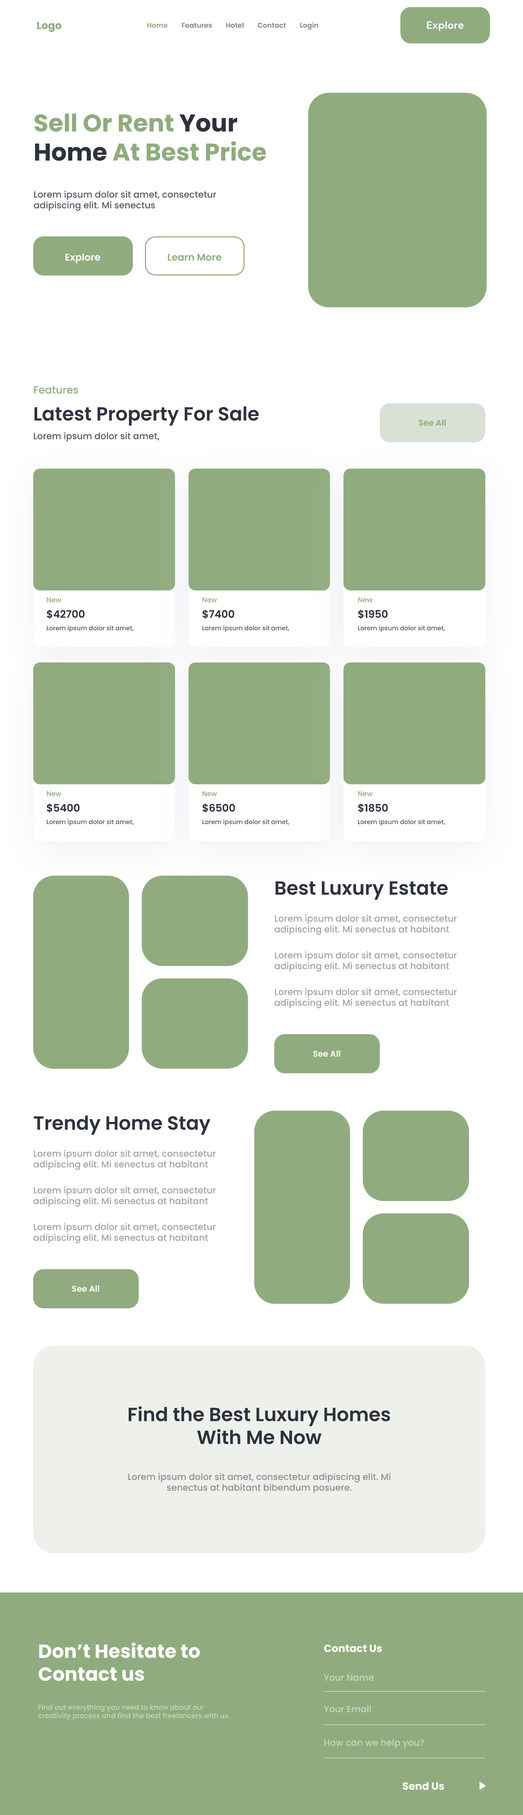
<style>
.page{position:relative;width:523px;height:1815px;background:#ffffff}
.page>*{position:absolute;margin:0}
.t1{font:6.9px "Poppins-SemiBold";color:#90ac7f}
.t2{font:6.9px "Poppins-SemiBold";color:#81848b}
.t3{font:10.4px "DMSans-Bold";color:#ffffff}
.t4{font:24.2px "Poppins-Bold";color:#90ac7f}
.t5{font:24.2px "Poppins-Bold";color:#2d323d}
.t6{font:9px "Poppins-Medium";color:#575b64}
.t7{font:9.7px "Poppins-SemiBold";color:#fefefe}
.t8{font:9.7px "Poppins-SemiBold";color:#90ac7f}
.t9{font:10.4px "Poppins-Medium";color:#90ac7f}
.t10{font:19px "Poppins-SemiBold";color:#2d323d}
.t11{font:8.3px "Poppins-SemiBold";color:#90ac7f}
.t12{font:6.9px "Poppins-Medium";color:#90ac7f}
.t13{font:10.4px "Poppins-SemiBold";color:#2d323d}
.t14{font:6.2px "Poppins-Medium";color:#575b64}
.t15{font:9px "Poppins-Medium";color:#a0a3a8}
.t16{font:8.3px "Poppins-SemiBold";color:#ffffff}
.t17{font:9px "Poppins-Medium";color:#8d9194}
.t18{font:19px "Poppins-Bold";color:#ffffff}
.t19{font:10.4px "Poppins-Bold";color:#ffffff}
.t20{font:9px "Poppins-Medium";color:#c8d6bf}
.t21{font:6.9px "Poppins-Medium";color:#c8d6bf}
</style>
<div class="page">
<p class="t1" style="left:147px;top:23px;width:21px;height:5px">Home</p>
<p class="t2" style="left:182px;top:23px;width:30px;height:5px">Features</p>
<p class="t2" style="left:226px;top:22px;width:18px;height:6px">Hotel</p>
<p class="t2" style="left:258px;top:22px;width:28px;height:6px">Contact</p>
<p class="t2" style="left:300px;top:22px;width:18px;height:8px">Login</p>
<p class="t3" style="left:427px;top:21px;width:37px;height:10px">Explore</p>
<p class="t4" style="left:34px;top:114px;width:233px;height:47px">Sell Or Rent<span class="t5"> Your Home </span>At Best Price</p>
<p class="t6" style="left:34px;top:190px;width:182px;height:21px">Lorem ipsum dolor sit amet, consectetur adipiscing elit. Mi senectus</p>
<p class="t7" style="left:65px;top:253px;width:35px;height:10px">Explore</p>
<p class="t8" style="left:168px;top:254px;width:54px;height:7px">Learn More</p>
<p class="t9" style="left:34px;top:386px;width:44px;height:8px">Features</p>
<p class="t10" style="left:34px;top:406px;width:225px;height:20px">Latest Property For Sale</p>
<p class="t11" style="left:419px;top:420px;width:27px;height:6px">See All</p>
<p class="t6" style="left:34px;top:432px;width:126px;height:10px">Lorem ipsum dolor sit amet,</p>
<p class="t12" style="left:47px;top:597px;width:15px;height:6px">New</p>
<p class="t12" style="left:202px;top:597px;width:15px;height:6px">New</p>
<p class="t12" style="left:358px;top:597px;width:15px;height:6px">New</p>
<p class="t13" style="left:47px;top:610px;width:38px;height:9px">$42700</p>
<p class="t13" style="left:202px;top:610px;width:33px;height:9px">$7400</p>
<p class="t13" style="left:358px;top:610px;width:30px;height:9px">$1950</p>
<p class="t14" style="left:47px;top:626px;width:87px;height:6px">Lorem ipsum dolor sit amet,</p>
<p class="t14" style="left:202px;top:626px;width:88px;height:6px">Lorem ipsum dolor sit amet,</p>
<p class="t14" style="left:358px;top:626px;width:88px;height:6px">Lorem ipsum dolor sit amet,</p>
<p class="t12" style="left:47px;top:791px;width:15px;height:5px">New</p>
<p class="t12" style="left:202px;top:791px;width:15px;height:5px">New</p>
<p class="t12" style="left:358px;top:791px;width:15px;height:5px">New</p>
<p class="t13" style="left:47px;top:803px;width:33px;height:10px">$5400</p>
<p class="t13" style="left:202px;top:803px;width:33px;height:10px">$6500</p>
<p class="t13" style="left:358px;top:803px;width:30px;height:10px">$1850</p>
<p class="t14" style="left:47px;top:819px;width:87px;height:7px">Lorem ipsum dolor sit amet,</p>
<p class="t14" style="left:202px;top:819px;width:88px;height:7px">Lorem ipsum dolor sit amet,</p>
<p class="t14" style="left:358px;top:819px;width:88px;height:7px">Lorem ipsum dolor sit amet,</p>
<p class="t10" style="left:276px;top:881px;width:172px;height:19px">Best Luxury Estate</p>
<p class="t15" style="left:274px;top:915px;width:183px;height:20px">Lorem ipsum dolor sit amet, consectetur adipiscing elit. Mi senectus at habitant</p>
<p class="t15" style="left:274px;top:951px;width:183px;height:21px">Lorem ipsum dolor sit amet, consectetur adipiscing elit. Mi senectus at habitant</p>
<p class="t15" style="left:274px;top:988px;width:183px;height:21px">Lorem ipsum dolor sit amet, consectetur adipiscing elit. Mi senectus at habitant</p>
<p class="t16" style="left:313px;top:1051px;width:28px;height:6px">See All</p>
<p class="t10" style="left:34px;top:1116px;width:177px;height:19px">Trendy Home Stay</p>
<p class="t15" style="left:33px;top:1150px;width:183px;height:20px">Lorem ipsum dolor sit amet, consectetur adipiscing elit. Mi senectus at habitant</p>
<p class="t15" style="left:33px;top:1186px;width:183px;height:21px">Lorem ipsum dolor sit amet, consectetur adipiscing elit. Mi senectus at habitant</p>
<p class="t15" style="left:33px;top:1223px;width:183px;height:21px">Lorem ipsum dolor sit amet, consectetur adipiscing elit. Mi senectus at habitant</p>
<p class="t16" style="left:72px;top:1286px;width:27px;height:6px">See All</p>
<p class="t10" style="left:129px;top:1406px;width:261px;height:38px;text-align:center">Find the Best Luxury Homes <br>With Me Now</p>
<p class="t17" style="left:128px;top:1473px;width:263px;height:20px;text-align:center">Lorem ipsum dolor sit amet, consectetur adipiscing elit. Mi senectus at habitant bibendum posuere.</p>
<p class="t18" style="left:38px;top:1642px;width:162px;height:39px">Don’t Hesitate to<br>Contact us</p>
<p class="t19" style="left:324px;top:1645px;width:58px;height:8px">Contact Us</p>
<p class="t20" style="left:324px;top:1674px;width:50px;height:7px">Your Name</p>
<p class="t21" style="left:38px;top:1704px;width:192px;height:16px">Find out everything you need to know about our creativity process and find the best freelancers with us.</p>
<p class="t20" style="left:324px;top:1705px;width:47px;height:8px">Your Email</p>
<p class="t20" style="left:324px;top:1739px;width:100px;height:9px">How can we help you?</p>
<p class="t19" style="left:403px;top:1782px;width:41px;height:8px">Send Us</p>
</div>
